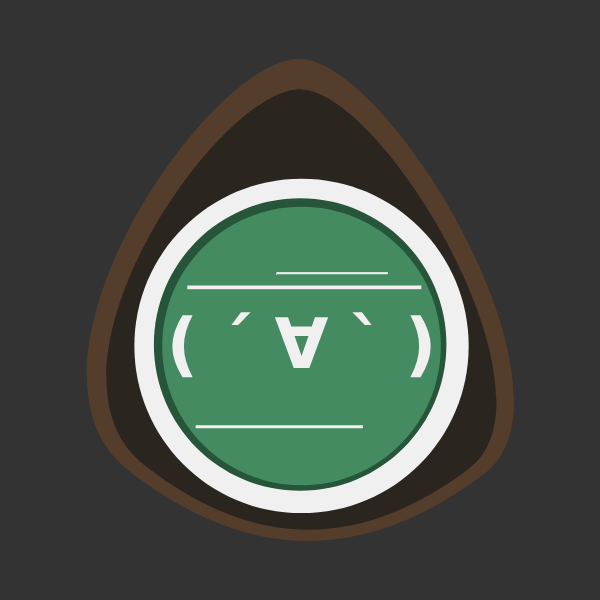
<style>
.page{position:relative;width:600px;height:600px;background:#333333}
.page>*{position:absolute;margin:0}
.t1{font:69.6px "DejaVuSans-Bold";letter-spacing:-0.05em;color:#f0f0f0}
</style>
<div class="page">
<p class="t1" style="left:172px;top:312px;width:259px;height:66px">( ´ ∀ ` )</p>
</div>
